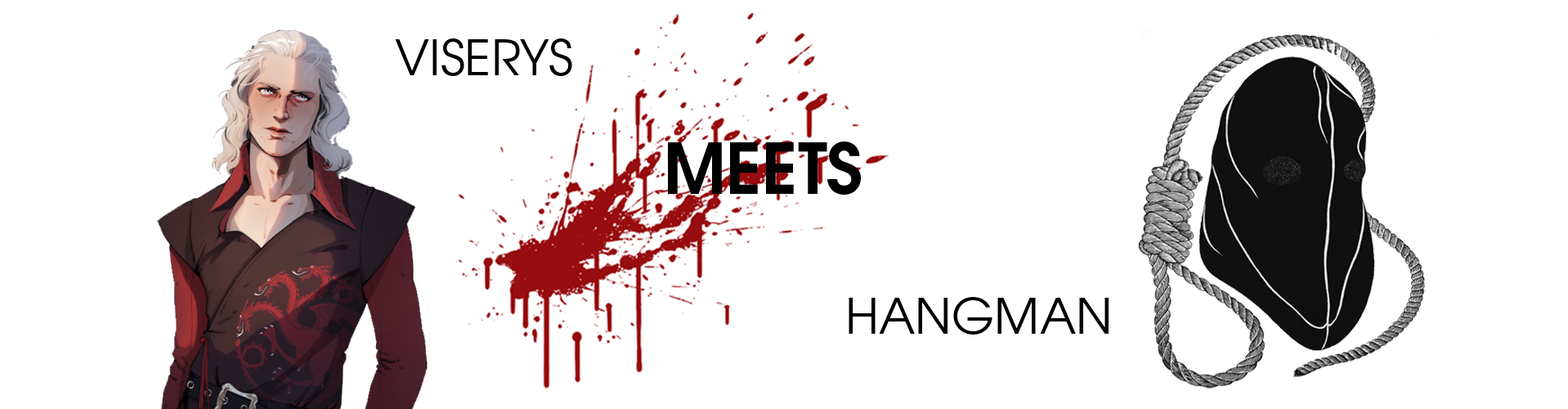
<style>
.page{position:relative;width:1568px;height:409px;background:#ffffff}
.page>*{position:absolute;margin:0}
.t1{font:49.1px "TeXGyreAdventor-Regular";color:#000000}
.t2{font:69.5px "TeXGyreAdventor-Bold";color:#000000}
</style>
<div class="page">
<p class="t1" style="left:395px;top:38px;width:177px;height:38px">VISERYS</p>
<p class="t2" style="left:668px;top:141px;width:193px;height:54px">MEETS</p>
<p class="t1" style="left:849px;top:297px;width:260px;height:37px">HANGMAN</p>
</div>
